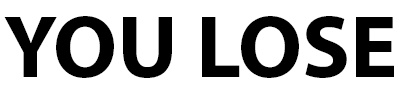
<style>
.page{position:relative;width:400px;height:100px;background:#ffffff}
.page>*{position:absolute;margin:0}
.t1{font:89.2px "MyriadPro-Bold";color:#000000}
</style>
<div class="page">
<p class="t1" style="left:4px;top:16px;width:390px;height:62px">YOU LOSE</p>
</div>
